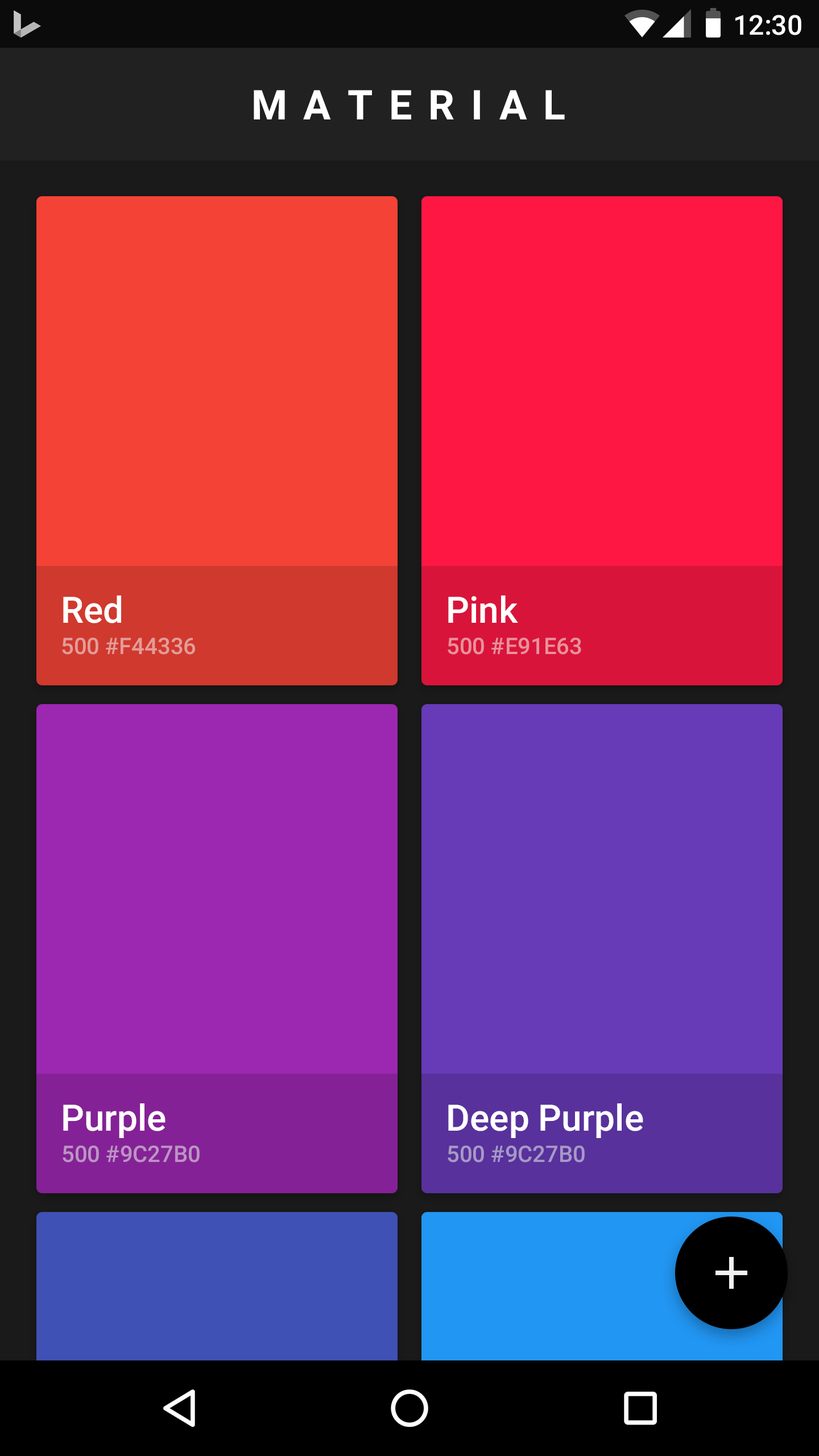
<style>
.page{position:relative;width:819px;height:1456px}
.page>*{position:absolute;margin:0}
.t1{font:27.3px "Roboto-Medium";color:#ffffff}
.t2{font:40.9px "Roboto-Bold";letter-spacing:0.4em;color:#ffffff}
.t3{font:36.4px "Roboto-Medium";color:#ffffff}
.t4{font:22.7px "Roboto-Medium";color:#e49c98}
.t5{font:22.7px "Roboto-Medium";color:#e9919c}
.t6{font:22.7px "Roboto-Medium";color:#bc94c4}
.t7{font:22.7px "Roboto-Medium";color:#a799c7}
</style>
<div class="page">
<p class="t1" style="left:735px;top:15px;width:66px;height:20px">12:30</p>
<p class="t2" style="left:254px;top:90px;width:311px;height:29px">MATERIAL</p>
<p class="t3" style="left:63px;top:595px;width:58px;height:28px">Red</p>
<p class="t3" style="left:448px;top:595px;width:70px;height:28px">Pink</p>
<p class="t4" style="left:62px;top:638px;width:133px;height:17px">500 #F44336</p>
<p class="t5" style="left:448px;top:638px;width:133px;height:17px">500 #E91E63</p>
<p class="t3" style="left:63px;top:1103px;width:103px;height:35px">Purple</p>
<p class="t3" style="left:448px;top:1103px;width:195px;height:35px">Deep Purple</p>
<p class="t6" style="left:63px;top:1145px;width:137px;height:18px">500 #9C27B0</p>
<p class="t7" style="left:448px;top:1145px;width:137px;height:18px">500 #9C27B0</p>
</div>
